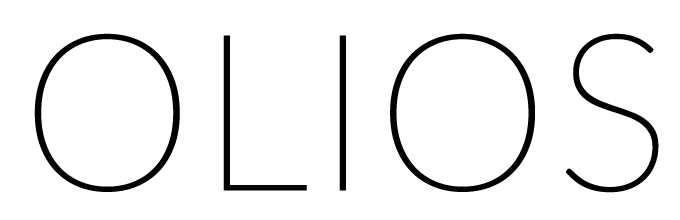
<style>
.page{position:relative;width:680px;height:220px;background:#ffffff}
.page>*{position:absolute;margin:0}
.t1{font:220px "Lato-Thin";letter-spacing:0.025em;color:#000000}
</style>
<div class="page">
<p class="t1" style="left:34px;top:33px;width:625px;height:160px">OLIOS</p>
</div>
